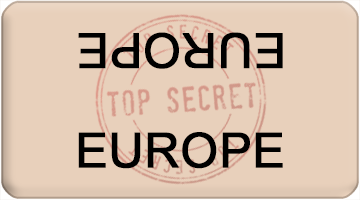
<style>
.page{position:relative;width:360px;height:200px;background:#e8d0bb}
.page>*{position:absolute;margin:0}
.t1{font:48px "ArialMT";color:#000000;font-weight:bold}
</style>
<div class="page">
<p class="t1" style="left:78px;top:32px;width:205px;height:37px;rotate:180deg">EUROPE</p>
<p class="t1" style="left:78px;top:132px;width:205px;height:37px">EUROPE</p>
</div>
